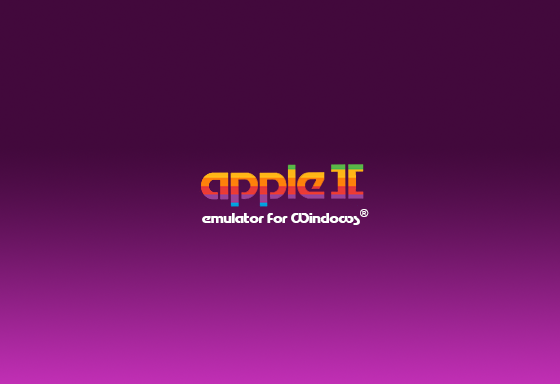
<style>
.page{position:relative;width:560px;height:384px;background:#42093c}
.page>*{position:absolute;margin:0}
.t1{font:11px "Kalinga-Bold";color:#ffffff}
.t2{font:12px "Motter-TekturaCyrilic";color:#ffffff}
</style>
<div class="page">
<p class="t1" style="left:360px;top:209px;width:9px;height:8px">®</p>
<p class="t2" style="left:202px;top:213px;width:158px;height:12px">emulator for Windows</p>
</div>
